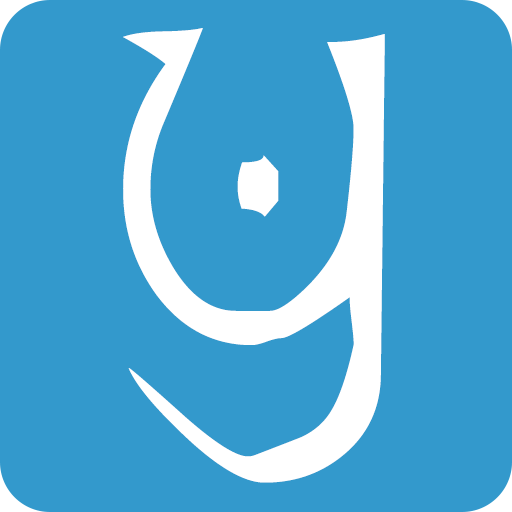
<style>
.page{position:relative;width:512px;height:512px;background:#3399cc}
.page>*{position:absolute;margin:0}
.t1{font:500px "NockerCranky";color:#ffffff}
</style>
<div class="page">
<p class="t1" style="left:123px;top:28px;width:262px;height:455px">Y</p>
</div>
